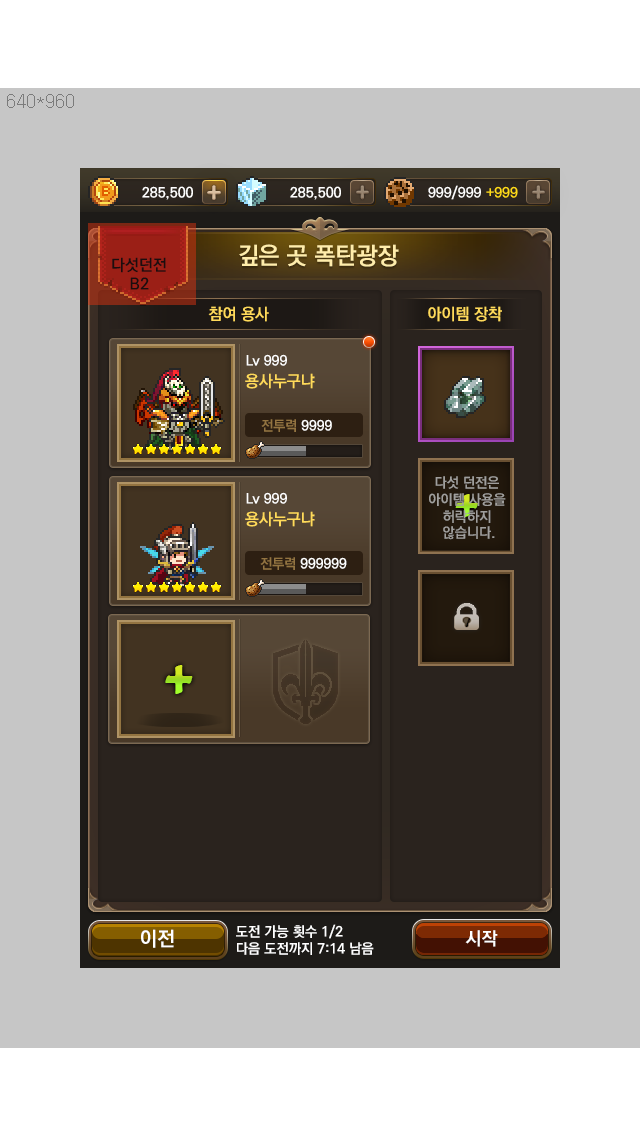
<style>
.page{position:relative;width:640px;height:1136px;background:#c6c6c6}
.page>*{position:absolute;margin:0}
.t1{font:24px "KoPubDotumBold";color:#ffedab}
.t2{font:16px "KoPubDotumBold";color:#1b0e0f}
.t3{font:16px "KoPubDotumBold";color:#ffda5b}
.t4{font:14px "KoPubDotumBold";color:#ffffff}
.t5{font:16px "KoPubDotumBold";color:#ffda5a}
.t6{font:14px "KoPubDotumBold";color:#937441}
.t7{font:14px "KoPubDotumBold";color:#a09f9d}
.t8{font:48px "CooperBlack";scale:0.96 1}
.t9{font:58px "CooperBlack";scale:0.96 1}
.t10{font:20px "KoPubDotumBold";color:#ffffff}
.t11{font:18px "KoPubDotumBold";color:#ffffff}
</style>
<div class="page">
<p class="t1" style="left:239px;top:244px;width:160px;height:23px">깊은 곳 폭탄광장</p>
<p class="t2" style="left:112px;top:257px;width:54px;height:33px">다섯던전<br>    B2</p>
<p class="t3" style="left:208px;top:306px;width:61px;height:16px">참여 용사</p>
<p class="t3" style="left:428px;top:306px;width:74px;height:16px">아이템 장착</p>
<p class="t4" style="left:246px;top:354px;width:41px;height:12px">Lv 999</p>
<p class="t5" style="left:245px;top:373px;width:70px;height:16px">용사누구냐</p>
<p class="t6" style="left:261px;top:419px;width:35px;height:13px">전투력</p>
<p class="t4" style="left:301px;top:419px;width:31px;height:12px">9999</p>
<p class="t7" style="left:429px;top:476px;width:77px;height:64px;text-align:center">다섯 던전은 <br>아이템 사용을 <br>허락하지 <br>않습니다.</p>
<p class="t4" style="left:246px;top:492px;width:41px;height:12px">Lv 999</p>
<p class="t8" style="left:455px;top:494px;width:23px;height:23px">+</p>
<p class="t5" style="left:245px;top:511px;width:70px;height:16px">용사누구냐</p>
<p class="t6" style="left:260px;top:557px;width:35px;height:13px">전투력</p>
<p class="t4" style="left:300px;top:557px;width:47px;height:12px">999999</p>
<p class="t9" style="left:165px;top:665px;width:28px;height:29px">+</p>
<p class="t10" style="left:141px;top:929px;width:33px;height:19px">이전</p>
<p class="t4" style="left:236px;top:924px;width:138px;height:31px">도전 가능 횟수 1/2<br>다음 도전까지 7:14 남음</p>
<p class="t11" style="left:465px;top:930px;width:33px;height:17px">시작</p>
</div>
